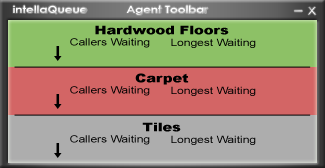
<style>
.page{position:relative;width:325px;height:168px;background:#adadad}
.page>*{position:absolute;margin:0}
.t1{font:10px "CenturyGothic-Bold";color:#ffffff;scale:1.2 1}
.t2{font:10px "ArialMT";scale:1.2 1}
.t3{font:12px "Arial-Black";color:#000000;scale:1.2 1}
.t4{font:10px "ArialMT";color:#000000;scale:1.2 1}
</style>
<div class="page">
<p class="t1" style="left:13px;top:5px;width:74px;height:9px">intellaQueue</p>
<p class="t1" style="left:126px;top:5px;width:82px;height:10px">Agent Toolbar</p>
<p class="t2" style="left:308px;top:7px;width:8px;height:8px">X</p>
<p class="t3" style="left:95px;top:25px;width:134px;height:10px">Hardwood Floors</p>
<p class="t4" style="left:70px;top:38px;width:80px;height:10px">Callers Waiting</p>
<p class="t4" style="left:171px;top:38px;width:85px;height:10px">Longest Waiting</p>
<p class="t3" style="left:135px;top:73px;width:54px;height:12px">Carpet</p>
<p class="t4" style="left:70px;top:86px;width:80px;height:10px">Callers Waiting</p>
<p class="t4" style="left:171px;top:86px;width:85px;height:10px">Longest Waiting</p>
<p class="t3" style="left:142px;top:122px;width:39px;height:10px">Tiles</p>
<p class="t4" style="left:70px;top:135px;width:80px;height:10px">Callers Waiting</p>
<p class="t4" style="left:171px;top:135px;width:85px;height:10px">Longest Waiting</p>
</div>
